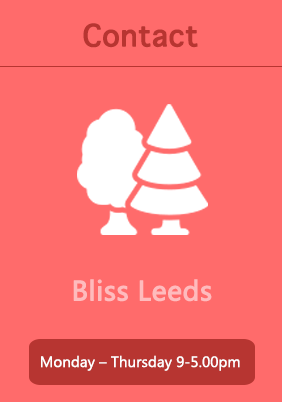
<style>
.page{position:relative;width:282px;height:402px;background:#ff6b6b}
.page>*{position:absolute;margin:0}
.t1{font:40px "AppleSymbols";color:#b73531;font-weight:bold}
.t2{font:26px "MicrosoftYaHei";color:#febbbd;font-weight:bold}
.t3{font:14px "MicrosoftYaHei";color:#ffffff}
</style>
<div class="page">
<p class="t1" style="left:83px;top:23px;width:115px;height:25px">Contact</p>
<p class="t2" style="left:73px;top:279px;width:139px;height:23px">Bliss Leeds</p>
<p class="t3" style="left:41px;top:355px;width:199px;height:16px">Monday – Thursday 9-5.00pm</p>
</div>
